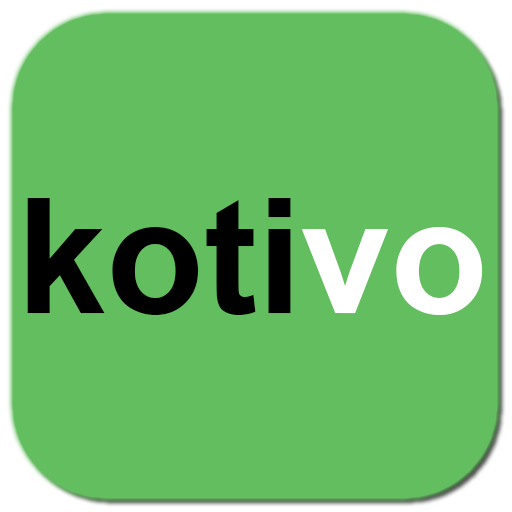
<style>
.page{position:relative;width:512px;height:512px;background:#63be5f}
.page>*{position:absolute;margin:0}
.t1{font:160px "Arial-BoldMT";color:#000000}
.t2{font:160px "Arial-BoldMT";color:#ffffff}
</style>
<div class="page">
<p class="t1" style="left:27px;top:198px;width:456px;height:117px">koti<span class="t2">vo</span></p>
</div>
